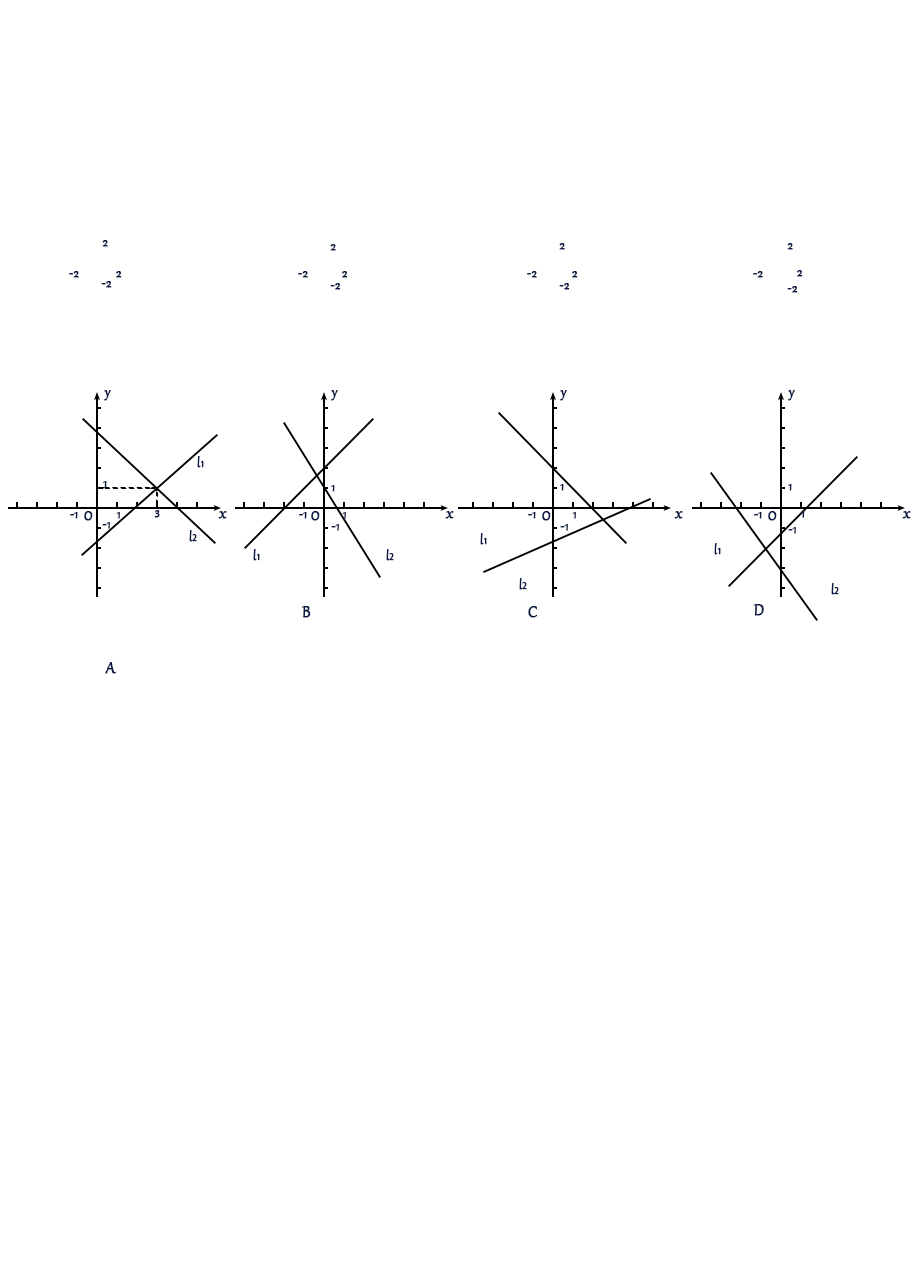
<style>
.page{position:relative;width:916px;height:1268px;background:#ffffff}
.page>*{position:absolute;margin:0}
.t1{font:12px "Gabriola";color:#081842;font-weight:bold}
.t2{font:16px "Gabriola";color:#081842;font-weight:bold}
.t3{font:8px "AdobeHeitiStd-Regular";color:#081842;font-weight:bold}
.t4{font:13.3px "Gabriola";color:#081842;font-weight:bold}
.t5{font:12px "Gabriola";font-weight:bold}
.t6{font:18.7px "Gabriola";color:#081842;font-weight:bold}
</style>
<div class="page">
<p class="t1" style="left:102px;top:240px;width:6px;height:7px">2</p>
<p class="t1" style="left:330px;top:244px;width:6px;height:7px">2</p>
<p class="t1" style="left:559px;top:243px;width:6px;height:7px">2</p>
<p class="t1" style="left:787px;top:243px;width:6px;height:7px">2</p>
<p class="t1" style="left:797px;top:270px;width:6px;height:7px">2</p>
<p class="t1" style="left:69px;top:271px;width:10px;height:7px">-2</p>
<p class="t1" style="left:101px;top:281px;width:11px;height:7px">-2</p>
<p class="t1" style="left:116px;top:271px;width:6px;height:7px">2</p>
<p class="t1" style="left:298px;top:271px;width:10px;height:7px">-2</p>
<p class="t1" style="left:342px;top:271px;width:6px;height:7px">2</p>
<p class="t1" style="left:527px;top:271px;width:10px;height:7px">-2</p>
<p class="t1" style="left:572px;top:271px;width:6px;height:7px">2</p>
<p class="t1" style="left:753px;top:271px;width:10px;height:7px">-2</p>
<p class="t1" style="left:330px;top:283px;width:11px;height:7px">-2</p>
<p class="t1" style="left:559px;top:283px;width:11px;height:7px">-2</p>
<p class="t1" style="left:787px;top:286px;width:11px;height:7px">-2</p>
<p class="t2" style="left:104px;top:390px;width:7px;height:11px">y</p>
<p class="t2" style="left:331px;top:390px;width:7px;height:11px">y</p>
<p class="t2" style="left:560px;top:390px;width:7px;height:11px">y</p>
<p class="t2" style="left:788px;top:390px;width:7px;height:11px">y</p>
<p class="t1" style="left:197px;top:456px;width:7px;height:12px">l<span class="t3">1</span></p>
<p class="t1" style="left:103px;top:481px;width:4px;height:7px">1</p>
<p class="t1" style="left:331px;top:485px;width:4px;height:7px">1</p>
<p class="t1" style="left:560px;top:484px;width:4px;height:7px">1</p>
<p class="t1" style="left:788px;top:484px;width:4px;height:7px">1</p>
<p class="t4" style="left:154px;top:510px;width:6px;height:8px">3</p>
<p class="t1" style="left:70px;top:512px;width:8px;height:7px">-1</p>
<p class="t2" style="left:84px;top:511px;width:9px;height:10px">O</p>
<p class="t5" style="left:116px;top:512px;width:4px;height:7px">1</p>
<p class="t6" style="left:218px;top:511px;width:9px;height:8px">x</p>
<p class="t1" style="left:299px;top:512px;width:8px;height:7px">-1</p>
<p class="t2" style="left:311px;top:511px;width:9px;height:10px">O</p>
<p class="t6" style="left:445px;top:511px;width:9px;height:8px">x</p>
<p class="t1" style="left:528px;top:512px;width:8px;height:7px">-1</p>
<p class="t2" style="left:542px;top:511px;width:9px;height:10px">O</p>
<p class="t5" style="left:572px;top:512px;width:4px;height:7px">1</p>
<p class="t6" style="left:674px;top:511px;width:9px;height:8px">x</p>
<p class="t1" style="left:754px;top:512px;width:8px;height:7px">-1</p>
<p class="t2" style="left:768px;top:511px;width:9px;height:10px">O</p>
<p class="t1" style="left:800px;top:511px;width:5px;height:7px">1</p>
<p class="t6" style="left:902px;top:511px;width:9px;height:8px">x</p>
<p class="t1" style="left:102px;top:522px;width:8px;height:7px">-1</p>
<p class="t1" style="left:189px;top:530px;width:8px;height:12px">l<span class="t3">2</span></p>
<p class="t1" style="left:331px;top:524px;width:8px;height:7px">-1</p>
<p class="t1" style="left:480px;top:533px;width:7px;height:12px">l<span class="t3">1</span></p>
<p class="t1" style="left:560px;top:524px;width:8px;height:7px">-1</p>
<p class="t1" style="left:788px;top:527px;width:8px;height:7px">-1</p>
<p class="t1" style="left:714px;top:543px;width:7px;height:12px">l<span class="t3">1</span></p>
<p class="t1" style="left:253px;top:549px;width:7px;height:12px">l<span class="t3">1</span></p>
<p class="t1" style="left:386px;top:549px;width:8px;height:12px">l<span class="t3">2</span></p>
<p class="t1" style="left:519px;top:578px;width:8px;height:12px">l<span class="t3">2</span></p>
<p class="t1" style="left:831px;top:583px;width:8px;height:12px">l<span class="t3">2</span></p>
<p class="t6" style="left:301px;top:606px;width:10px;height:12px">B</p>
<p class="t6" style="left:528px;top:606px;width:10px;height:12px">C</p>
<p class="t6" style="left:753px;top:604px;width:11px;height:12px">D</p>
<p class="t6" style="left:105px;top:662px;width:11px;height:12px">A</p>
</div>
